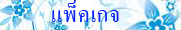
<style>
.page{position:relative;width:181px;height:30px}
.page>*{position:absolute;margin:0}
.t1{font:30px "AngsanaUPC";letter-spacing:0.025em;color:#0824f9}
</style>
<div class="page">
<p class="t1" style="left:51px;top:0px;width:68px;height:22px">แพ็คเกจ</p>
</div>
